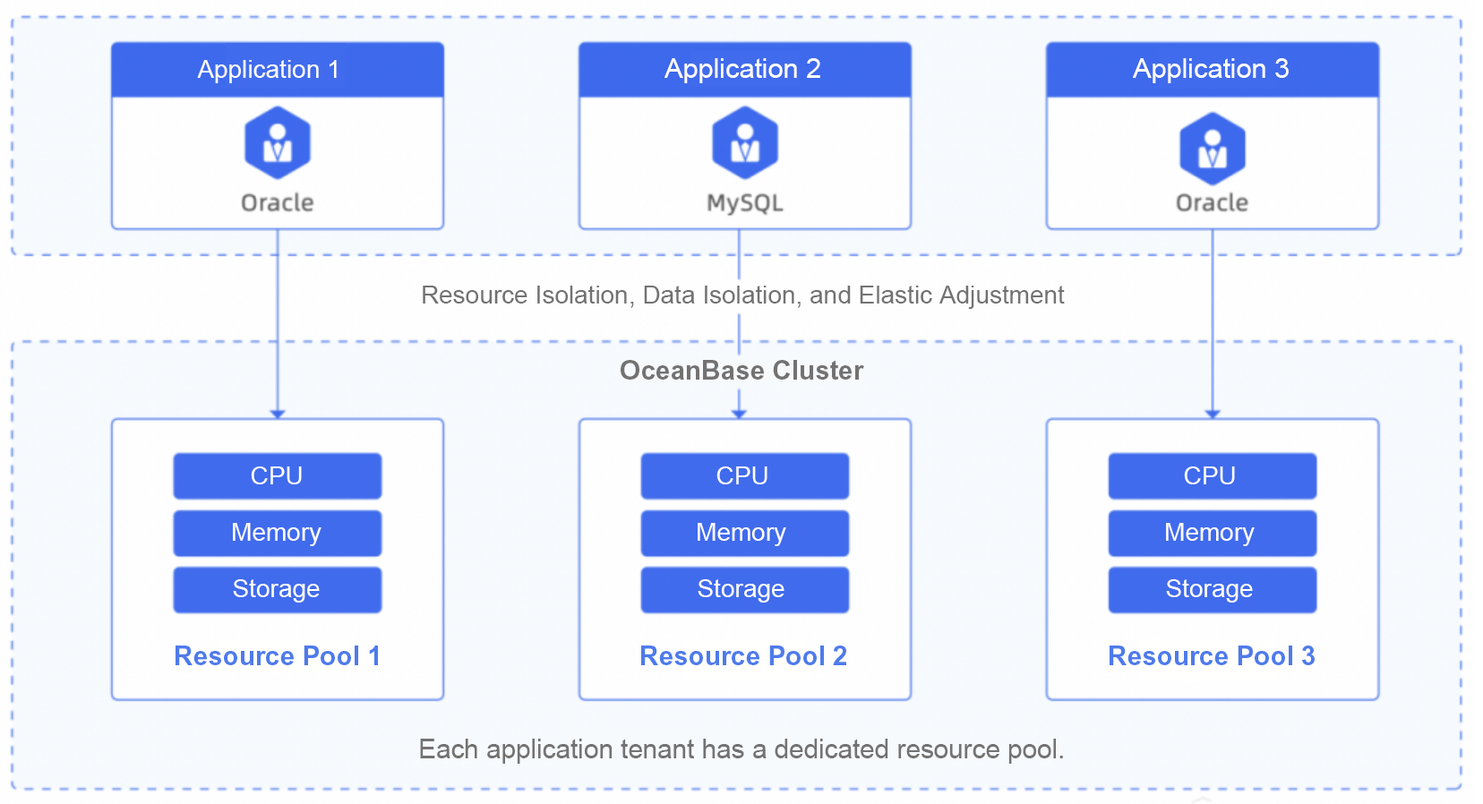
<style>
.page{position:relative;width:1483px;height:804px;background:#fefefe}
.page>*{position:absolute;margin:0}
.t1{font:25.1px "ArialMT";color:#ffffff}
.t2{font:27.3px "ArialMT";color:#ffffff}
.t3{font:25.1px "ArialMT";color:#737272}
.t4{font:26.6px "Arial-BoldMT";color:#737272}
.t5{font:26.6px "Arial-BoldMT";color:#4e7beb}
.t6{font:26.6px "ArialMT";color:#737272}
</style>
<div class="page">
<p class="t1" style="left:197px;top:60px;width:140px;height:23px">Application 1</p>
<p class="t2" style="left:664px;top:58px;width:156px;height:25px">Application 2</p>
<p class="t2" style="left:1133px;top:58px;width:156px;height:25px">Application 3</p>
<p class="t3" style="left:423px;top:286px;width:642px;height:23px">Resource Isolation, Data Isolation, and Elastic Adjustment</p>
<p class="t4" style="left:621px;top:360px;width:243px;height:20px">OceanBase Cluster</p>
<p class="t1" style="left:251px;top:467px;width:51px;height:17px">CPU</p>
<p class="t1" style="left:716px;top:467px;width:51px;height:17px">CPU</p>
<p class="t1" style="left:1184px;top:467px;width:51px;height:17px">CPU</p>
<p class="t1" style="left:233px;top:523px;width:88px;height:23px">Memory</p>
<p class="t1" style="left:698px;top:523px;width:88px;height:23px">Memory</p>
<p class="t1" style="left:1166px;top:523px;width:89px;height:23px">Memory</p>
<p class="t1" style="left:233px;top:579px;width:87px;height:24px">Storage</p>
<p class="t1" style="left:698px;top:579px;width:86px;height:24px">Storage</p>
<p class="t1" style="left:1166px;top:579px;width:87px;height:24px">Storage</p>
<p class="t5" style="left:176px;top:646px;width:202px;height:19px">Resource Pool 1</p>
<p class="t5" style="left:641px;top:646px;width:205px;height:19px">Resource Pool 2</p>
<p class="t5" style="left:1109px;top:646px;width:206px;height:19px">Resource Pool 3</p>
<p class="t6" style="left:420px;top:739px;width:643px;height:25px">Each application tenant has a dedicated resource pool.</p>
</div>
